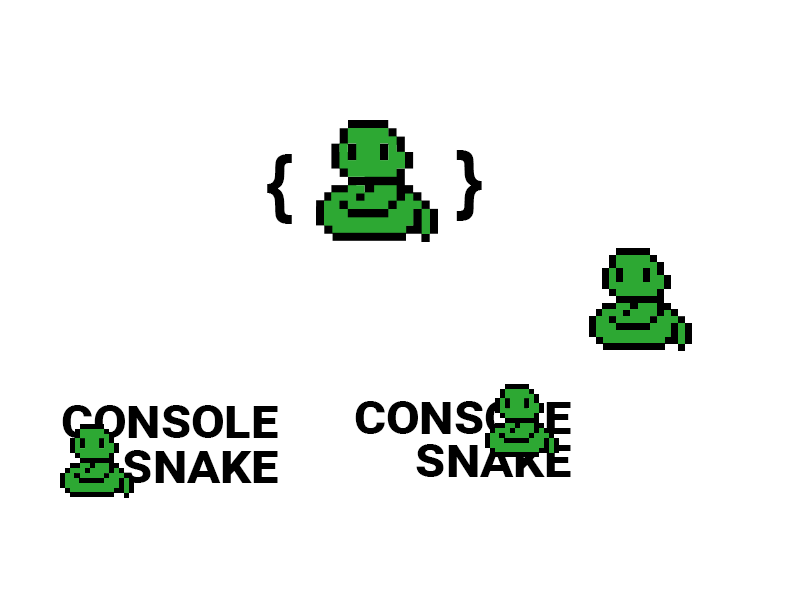
<style>
.page{position:relative;width:800px;height:600px;background:#ffffff}
.page>*{position:absolute;margin:0}
.t1{font:74.5px "Arial-BoldMT";color:#000000;font-variant:small-caps}
.t2{font:74.2px "Arial-BoldMT";color:#000000;font-variant:small-caps}
.t3{font:56.5px "Roboto-Bold";color:#000000;font-variant:small-caps}
</style>
<div class="page">
<p class="t1" style="left:456px;top:150px;width:26px;height:71px;rotate:180deg">{</p>
<p class="t2" style="left:267px;top:154px;width:25px;height:70px">{</p>
<p class="t3" style="left:355px;top:401px;width:216px;height:33px">console</p>
<p class="t3" style="left:62px;top:405px;width:216px;height:33px">console</p>
<p class="t3" style="left:416px;top:444px;width:155px;height:33px">snake</p>
<p class="t3" style="left:123px;top:450px;width:155px;height:33px">snake</p>
</div>
